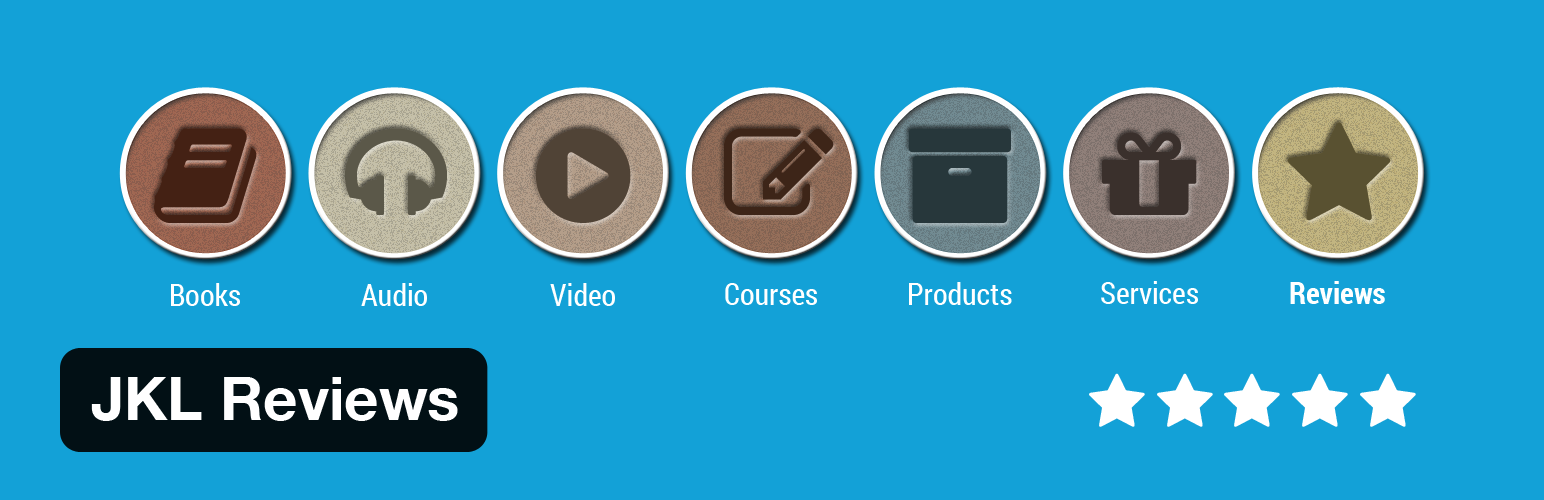
<style>
.page{position:relative;width:1544px;height:500px;background:#13a1d7}
.page>*{position:absolute;margin:0}
.t1{font:30px "RobotoCondensed-Regular";color:#ffffff}
.t2{font:30px "RobotoCondensed-Bold";color:#ffffff}
.t3{font:60px "HelveticaNeue-Bold";color:#ffffff}
</style>
<div class="page">
<p class="t1" style="left:1101px;top:281px;width:97px;height:23px">Services</p>
<p class="t2" style="left:1290px;top:281px;width:95px;height:23px">Reviews</p>
<p class="t1" style="left:171px;top:283px;width:69px;height:23px">Books</p>
<p class="t1" style="left:361px;top:283px;width:66px;height:23px">Audio</p>
<p class="t1" style="left:550px;top:283px;width:65px;height:23px">Video</p>
<p class="t1" style="left:725px;top:283px;width:92px;height:22px">Courses</p>
<p class="t1" style="left:909px;top:282px;width:103px;height:23px">Products</p>
<p class="t3" style="left:91px;top:377px;width:367px;height:44px">JKL Reviews</p>
</div>
